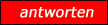
<style>
.page{position:relative;width:108px;height:25px;background:#ff0000}
.page>*{position:absolute;margin:0}
.t1{font:13.9px "Verdana";color:#ffffff;font-weight:bold;font-style:italic}
</style>
<div class="page">
<p class="t1" style="left:20px;top:7px;width:74px;height:11px">antworten</p>
</div>
